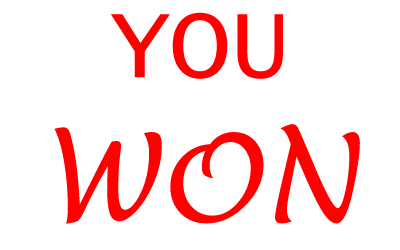
<style>
.page{position:relative;width:400px;height:250px;background:#ffffff}
.page>*{position:absolute;margin:0}
.t1{font:100px "LucidaConsole";color:#ff0000}
.t2{font:120px "LucidaHandwriting-Italic";color:#ff0000}
</style>
<div class="page">
<p class="t1" style="left:54px;top:12px;width:306px;height:212px;text-align:center">YOU<br><span class="t2">WON</span></p>
</div>
